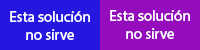
<style>
.page{position:relative;width:200px;height:50px;background:#2517df}
.page>*{position:absolute;margin:0}
.t1{font:15px "MyriadHebrew-Regular";color:#ffffff}
</style>
<div class="page">
<p class="t1" style="left:10px;top:11px;width:80px;height:29px;text-align:center">Esta solución<br>no sirve</p>
<p class="t1" style="left:110px;top:10px;width:80px;height:29px;text-align:center">Esta solución<br>no sirve</p>
</div>
